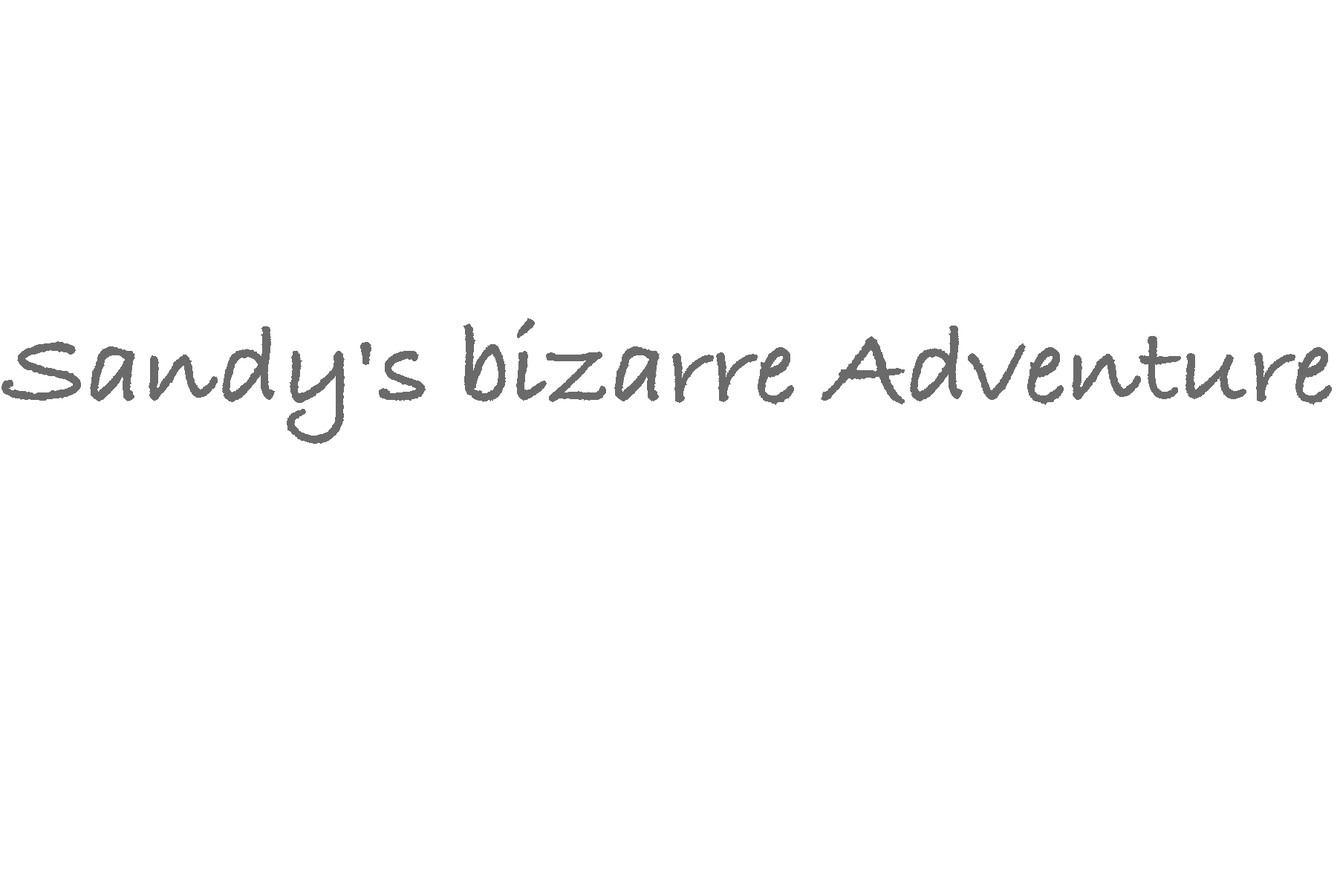
<style>
.page{position:relative;width:1337px;height:892px;background:#ffffff}
.page>*{position:absolute;margin:0}
.t1{font:111.5px "BradleyHandITCTT-Bold";color:#6a6a6a}
</style>
<div class="page">
<p class="t1" style="left:1px;top:318px;width:1331px;height:126px">Sandy's bizarre Adventure</p>
</div>
